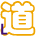
<style>
.page{position:relative;width:36px;height:36px;background:#ffffff}
.page>*{position:absolute;margin:0}
.t1{font:36px "STCaiyun";color:#efa500}
.t2{font:13.5px "MicrosoftYaHei";color:#3d107b;font-weight:bold}
</style>
<div class="page">
<p class="t1" style="left:0px;top:1px;width:36px;height:35px">道</p>
<p class="t2" style="left:1px;top:23px;width:7px;height:12px">L</p>
</div>
